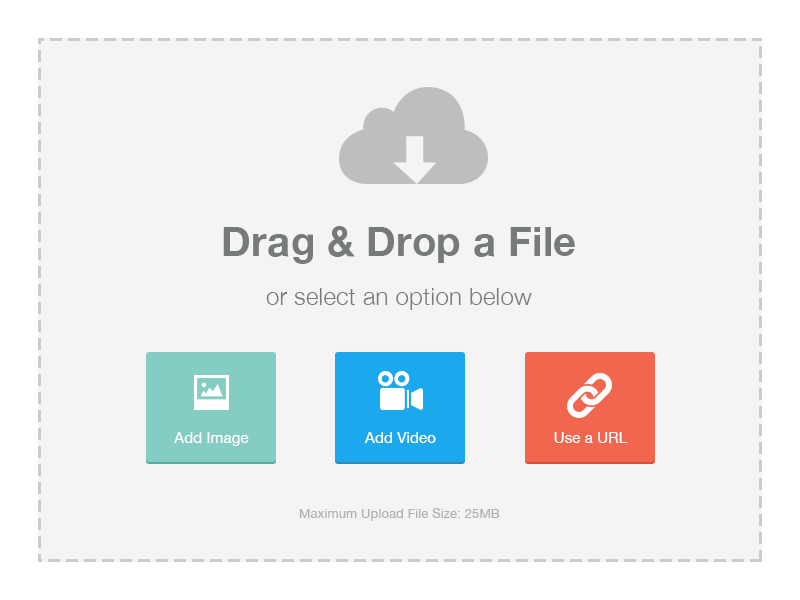
<style>
.page{position:relative;width:800px;height:600px;background:#f4f4f4}
.page>*{position:absolute;margin:0}
.t1{font:40.8px "HelveticaNeue-Bold";letter-spacing:0.01em;color:#767a7b}
.t2{font:24.5px "HelveticaNeue-Light";letter-spacing:0.01em;color:#767a7b}
.t3{font:15.3px "HelveticaNeue";letter-spacing:0.01em;color:#fefefe}
.t4{font:15.3px "HelveticaNeue";letter-spacing:0.01em;color:#ffffff}
.t5{font:13.3px "HelveticaNeue";letter-spacing:0.01em;color:#b0b0b0}
</style>
<div class="page">
<p class="t1" style="left:223px;top:226px;width:352px;height:38px">Drag &amp; Drop a File</p>
<p class="t2" style="left:266px;top:288px;width:266px;height:22px">or select an option below</p>
<p class="t3" style="left:174px;top:432px;width:75px;height:14px">Add Image</p>
<p class="t4" style="left:364px;top:432px;width:72px;height:11px">Add Video</p>
<p class="t3" style="left:554px;top:432px;width:74px;height:11px">Use a URL</p>
<p class="t5" style="left:299px;top:508px;width:201px;height:13px">Maximum Upload File Size: 25MB</p>
</div>
